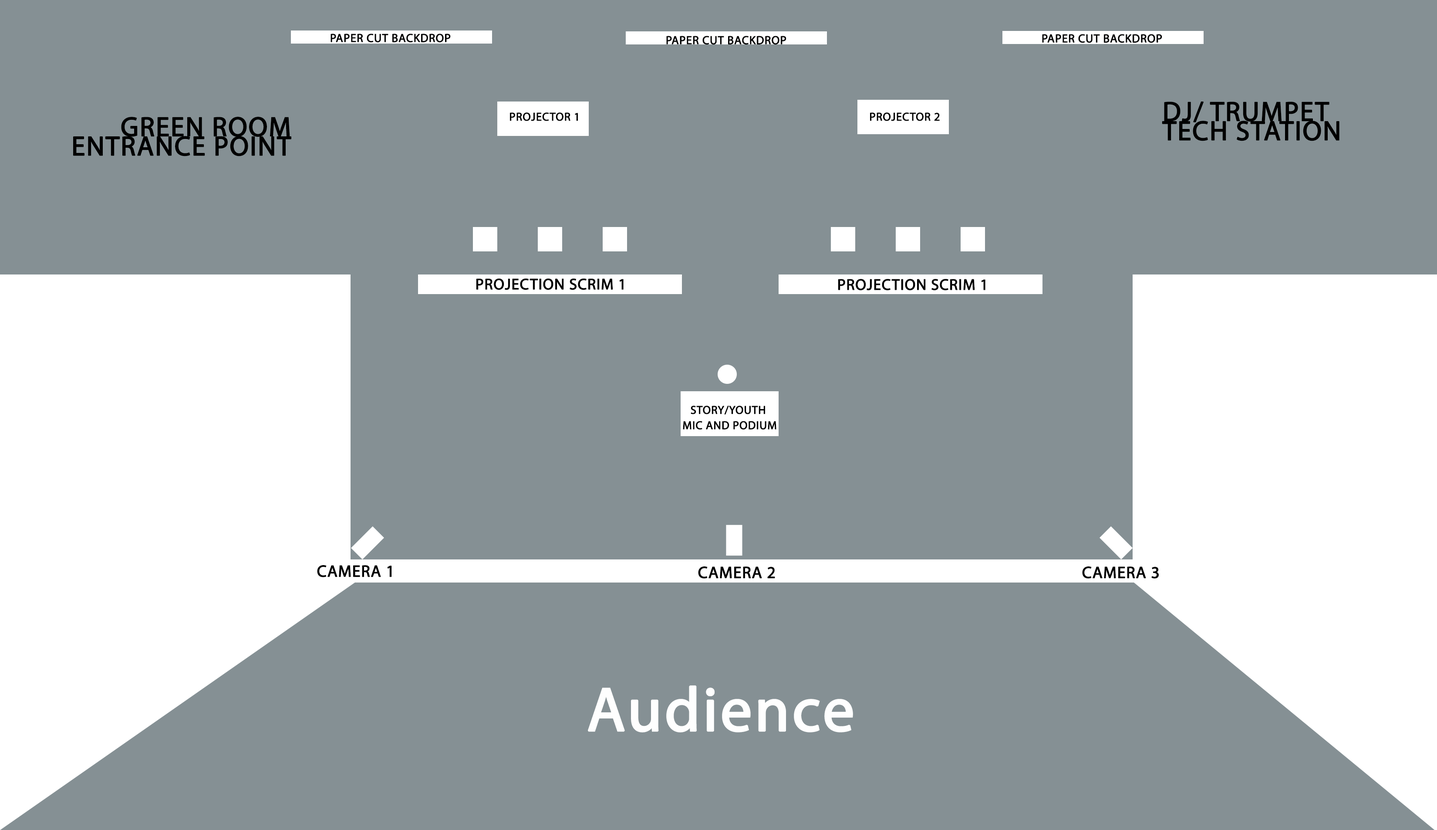
<style>
.page{position:relative;width:1437px;height:830px;background:#859094}
.page>*{position:absolute;margin:0}
.t1{font:11.8px "MyriadPro-Regular";letter-spacing:0.02em;color:#000000;text-transform:uppercase;font-weight:bold}
.t2{font:27.5px/19.3px "MyriadPro-Regular";letter-spacing:0.02em;color:#000000;text-transform:uppercase;font-weight:bold}
.t3{font:11.5px "MyriadPro-Regular";letter-spacing:0.02em;color:#000000;text-transform:uppercase;font-weight:bold}
.t4{font:15.5px "MyriadPro-Regular";letter-spacing:0.02em;color:#000000;text-transform:uppercase;font-weight:bold}
.t5{font:11.5px/15.3px "MyriadPro-Regular";letter-spacing:0.02em;color:#000000;text-transform:uppercase;font-weight:bold}
.t6{font:16.5px "MyriadPro-Regular";letter-spacing:0.02em;color:#000000;text-transform:uppercase;font-weight:bold}
.t7{font:62.5px "MyriadPro-Regular";letter-spacing:0.02em;color:#fefefe;font-weight:bold}
</style>
<div class="page">
<p class="t1" style="left:331px;top:34px;width:120px;height:9px">Paper Cut Backdrop</p>
<p class="t1" style="left:666px;top:36px;width:121px;height:9px">Paper Cut Backdrop</p>
<p class="t1" style="left:1042px;top:34px;width:120px;height:9px">Paper Cut Backdrop</p>
<p class="t2" style="left:1162px;top:101px;width:178px;height:40px">DJ/ Trumpet<br>Tech Station</p>
<p class="t3" style="left:510px;top:112px;width:68px;height:9px">Projector 1</p>
<p class="t3" style="left:870px;top:112px;width:70px;height:9px">Projector 2</p>
<p class="t2" style="left:73px;top:117px;width:218px;height:39px;text-align:right">Green Room<br>Entrance Point</p>
<p class="t4" style="left:476px;top:278px;width:148px;height:12px">projection scrim 1</p>
<p class="t4" style="left:838px;top:279px;width:148px;height:11px">projection scrim 1</p>
<p class="t5" style="left:683px;top:405px;width:94px;height:24px;text-align:center">story/youth <br>mic and podium</p>
<p class="t6" style="left:317px;top:565px;width:75px;height:12px">camera 1</p>
<p class="t6" style="left:698px;top:566px;width:77px;height:12px">camera 2</p>
<p class="t6" style="left:1082px;top:566px;width:77px;height:12px">camera 3</p>
<p class="t7" style="left:588px;top:685px;width:265px;height:47px">Audience</p>
</div>
